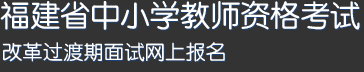
<style>
.page{position:relative;width:364px;height:72px;background:#333333}
.page>*{position:absolute;margin:0}
.t1{font:30px "FZY3JW--GB1-0";color:#ffffff}
.t2{font:20px "FZY3JW--GB1-0";letter-spacing:0.02em;color:#ffffff}
</style>
<div class="page">
<p class="t1" style="left:0px;top:0px;width:360px;height:30px">福建省中小学教师资格考试</p>
<p class="t2" style="left:2px;top:42px;width:223px;height:20px">改革过渡期面试网上报名</p>
</div>
